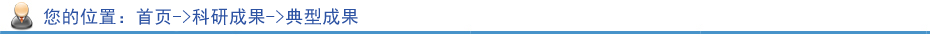
<style>
.page{position:relative;width:930px;height:36px;background:#ffffff}
.page>*{position:absolute;margin:0}
.t1{font:18px "SimHei";letter-spacing:0.03em;color:#2c52a3}
</style>
<div class="page">
<p class="t1" style="left:43px;top:8px;width:315px;height:17px">您的位置：首页-&gt;科研成果-&gt;典型成果</p>
</div>
